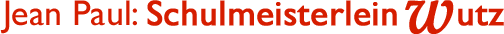
<style>
.page{position:relative;width:504px;height:34px;background:#ffffff}
.page>*{position:absolute;margin:0}
.t1{font:36px "GillSansMT";color:#d61d00;font-weight:bold}
.t2{font:36px "GillSansMT";color:#d61d00}
.t3{font:68px "PalatinoLinotype-Italic";color:#d61d00;font-weight:bold}
</style>
<div class="page">
<p class="t1" style="left:0px;top:0px;width:397px;height:34px"><span class="t2">Jean Paul: </span>Schulmeisterlein</p>
<p class="t3" style="left:405px;top:0px;width:49px;height:34px">w</p>
<p class="t1" style="left:458px;top:5px;width:46px;height:21px">utz</p>
</div>
